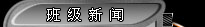
<style>
.page{position:relative;width:205px;height:27px;background:#000000}
.page>*{position:absolute;margin:0}
.t1{font:14px "SimSun";color:#ffffff}
.t2{font:12px "SimSun";color:#ffffff}
</style>
<div class="page">
<p class="t1" style="left:47px;top:8px;width:76px;height:13px"><span class="t2">  </span> 班 级 新 闻</p>
</div>
